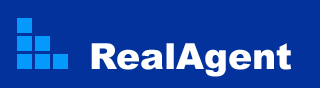
<style>
.page{position:relative;width:320px;height:88px;background:#04329c}
.page>*{position:absolute;margin:0}
.t1{font:36px "Arial-Black";color:#ffffff}
</style>
<div class="page">
<p class="t1" style="left:91px;top:43px;width:200px;height:34px">RealAgent</p>
</div>
